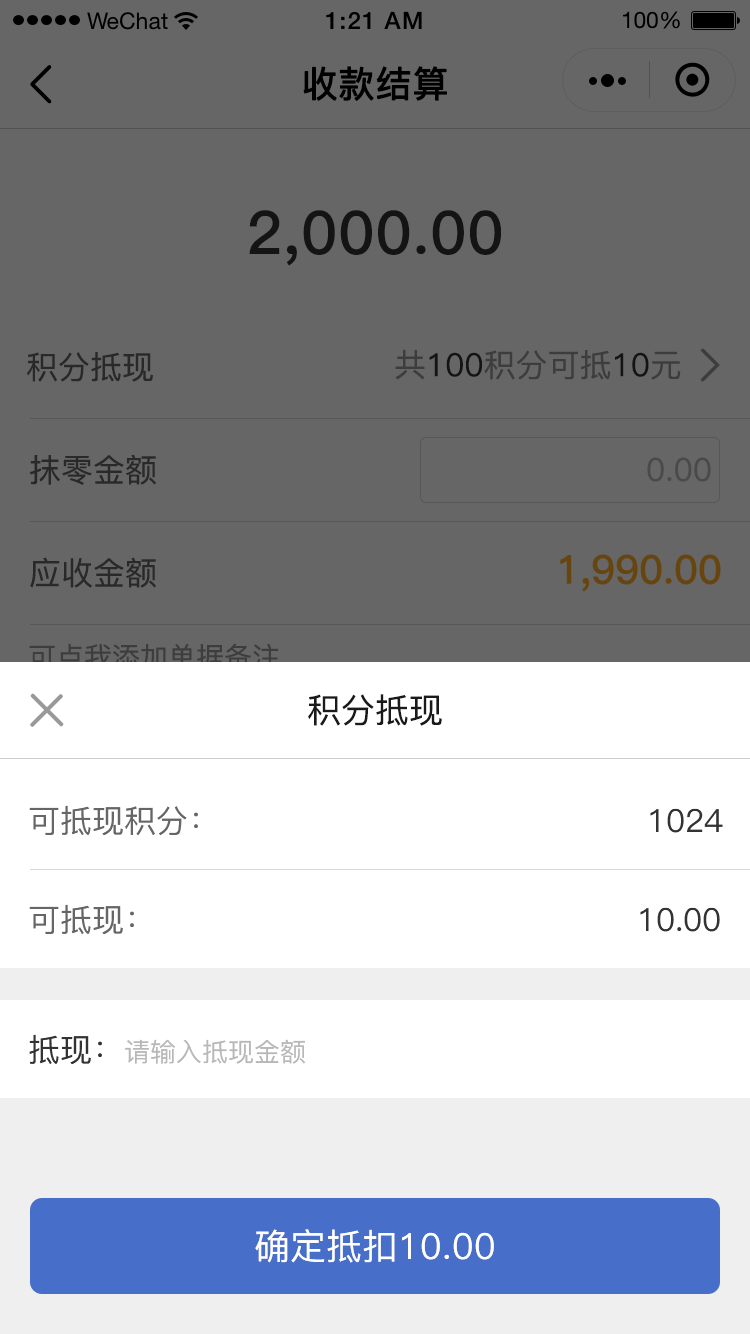
<style>
.page{position:relative;width:750px;height:1334px;background:#666666}
.page>*{position:absolute;margin:0}
.t1{font:36px "PingFang-SC-Medium";color:#000000;font-weight:bold}
.t2{font:60px "PingFang-SC-Bold";letter-spacing:0.02em;color:#141414}
.t3{font:32px "PingFang-SC-Medium";color:#292929}
.t4{font:32px "PingFang-SC-Medium";color:#999999}
.t5{font:32px "PingFang-SC-Medium";color:#333333}
.t6{font:32px "PingFang-SC-Medium";color:#4a4a4a}
.t7{font:40px "PingFang-SC-Bold";color:#66460e}
.t8{font:34px "PingFang-SC-Medium";color:#1a1a1a}
.t9{font:32px "PingFang-SC-Medium";color:#666666}
.t10{font:26px "PingFang-SC-Medium";color:#b8b8b8}
.t11{font:36px "PingFang-SC-Medium";color:#ffffff}
</style>
<div class="page">
<p class="t1" style="left:303px;top:66px;width:144px;height:35px">收款结算</p>
<p class="t2" style="left:249px;top:210px;width:252px;height:56px">2,000.00</p>
<p class="t3" style="left:27px;top:352px;width:126px;height:30px">积分抵现</p>
<p class="t4" style="left:395px;top:349px;width:286px;height:31px">共<span class="t5">100</span>积分可抵<span class="t5">10</span>元</p>
<p class="t3" style="left:30px;top:454px;width:126px;height:31px">抹零金额</p>
<p class="t6" style="left:647px;top:457px;width:64px;height:25px">0.00</p>
<p class="t3" style="left:30px;top:557px;width:126px;height:31px">应收金额</p>
<p class="t7" style="left:560px;top:554px;width:161px;height:38px">1,990.00</p>
<p class="t8" style="left:308px;top:694px;width:134px;height:32px">积分抵现</p>
<p class="t9" style="left:29px;top:805px;width:169px;height:31px">可抵现积分：</p>
<p class="t5" style="left:650px;top:808px;width:73px;height:25px">1024</p>
<p class="t9" style="left:29px;top:904px;width:105px;height:31px">可抵现：</p>
<p class="t5" style="left:640px;top:907px;width:80px;height:25px">10.00</p>
<p class="t10" style="left:29px;top:1034px;width:277px;height:31px"><span class="t5">抵现：</span>请输入抵现金额</p>
<p class="t11" style="left:255px;top:1229px;width:239px;height:34px">确定抵扣10.00</p>
</div>
